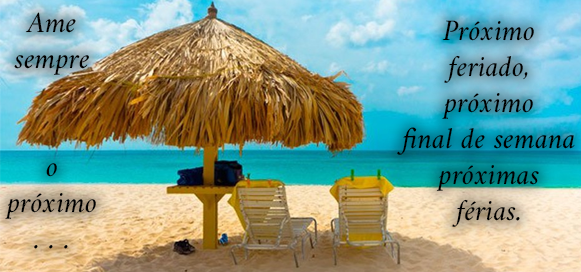
<style>
.page{position:relative;width:581px;height:272px}
.page>*{position:absolute;margin:0}
.t1{font:30px "Amiri-Slanted";color:#000000}
</style>
<div class="page">
<p class="t1" style="left:5px;top:12px;width:91px;height:237px;text-align:center">Ame sempre<br><br><br>o       próximo<br>. . .</p>
<p class="t1" style="left:397px;top:20px;width:178px;height:207px;text-align:center">Próximo        feriado,       próximo     final de semana próximas   férias.</p>
</div>
